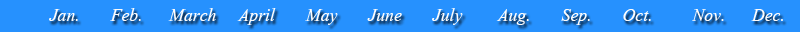
<style>
.page{position:relative;width:800px;height:32px;background:#2691fe}
.page>*{position:absolute;margin:0}
.t1{font:22px "Vijaya";color:#fdfcfc}
</style>
<div class="page">
<p class="t1" style="left:49px;top:8px;width:734px;height:17px">Jan.       Feb.      March     April       May       June       July        Aug.       Sep.       Oct.         Nov.      Dec.</p>
</div>
